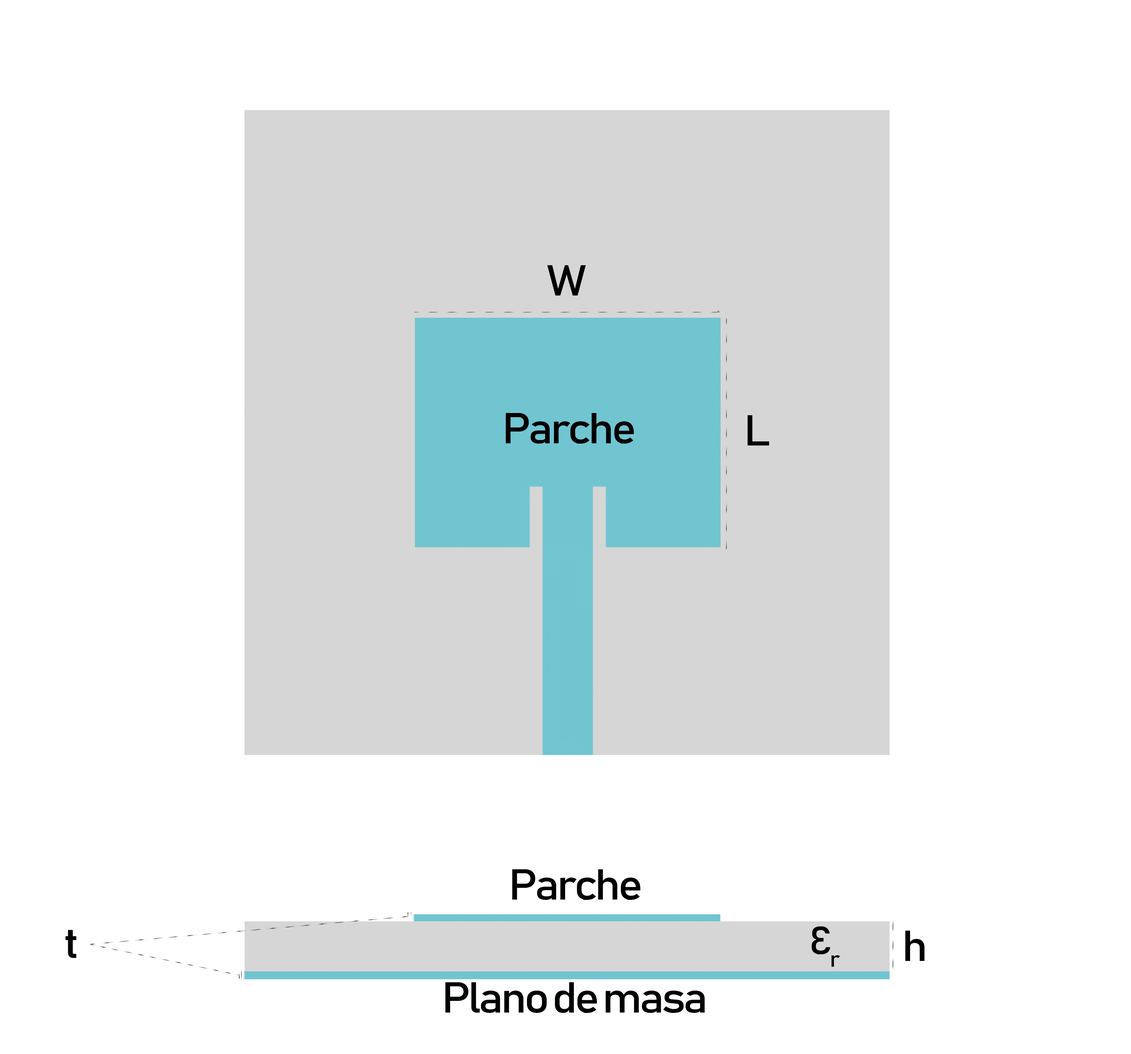
<style>
.page{position:relative;width:1131px;height:1054px;background:#ffffff}
.page>*{position:absolute;margin:0}
.t1{font:42.6px "Bahnschrift";letter-spacing:-0.06em;color:#000000;font-weight:bold;font-style:italic;scale:1.1 1}
.t2{font:38.5px "Bahnschrift";letter-spacing:-0.06em;color:#000000;font-weight:bold;font-style:italic;scale:1.1 1}
</style>
<div class="page">
<p class="t1" style="left:547px;top:265px;width:39px;height:31px">W</p>
<p class="t1" style="left:506px;top:413px;width:128px;height:31px">Parche</p>
<p class="t1" style="left:748px;top:415px;width:21px;height:31px">L</p>
<p class="t1" style="left:512px;top:869px;width:128px;height:31px">Parche</p>
<p class="t1" style="left:65px;top:930px;width:12px;height:28px">t</p>
<p class="t2" style="left:811px;top:927px;width:29px;height:40px">Ɛr</p>
<p class="t1" style="left:905px;top:931px;width:20px;height:30px">h</p>
<p class="t1" style="left:445px;top:982px;width:260px;height:31px">Plano de masa</p>
</div>
